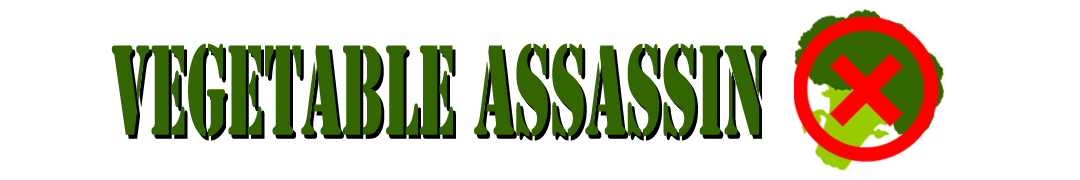
<style>
.page{position:relative;width:1080px;height:180px;background:#ffffff}
.page>*{position:absolute;margin:0}
.t1{font:119px "StencilStd";color:#336600;scale:0.48 1}
</style>
<div class="page">
<p class="t1" style="left:111px;top:43px;width:653px;height:94px">VEGETABLE ASSASSIN</p>
</div>
